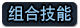
<style>
.page{position:relative;width:80px;height:28px}
.page>*{position:absolute;margin:0}
.t1{font:16px "SIL-Hei-Med-Jian";color:#97cdf4}
</style>
<div class="page">
<p class="t1" style="left:8px;top:5px;width:63px;height:16px">组合技能</p>
</div>
